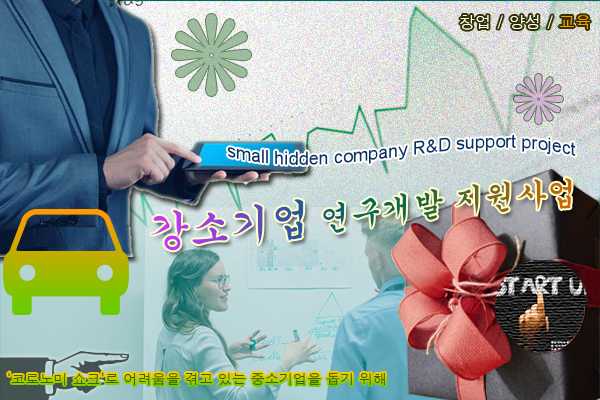
<style>
.page{position:relative;width:600px;height:400px}
.page>*{position:absolute;margin:0}
.t1{font:16px "Dotum";color:#ffffff}
.t2{font:16px "Dotum";color:#ff9900}
.t3{font:18px "ArialMT";color:#003366}
.t4{font:14px "Dotum";color:#336600}
</style>
<div class="page">
<p class="t1" style="left:460px;top:15px;width:130px;height:15px">창업 / 양성 / <span class="t2">교육</span></p>
<p class="t3" style="left:227px;top:134px;width:349px;height:31px">small hidden company R&amp;D support project</p>
<p class="t4" style="left:8px;top:372px;width:377px;height:14px">‘코로노미 쇼크’로 어려움을 겪고 있는 중소기업을 돕기 위해</p>
</div>
